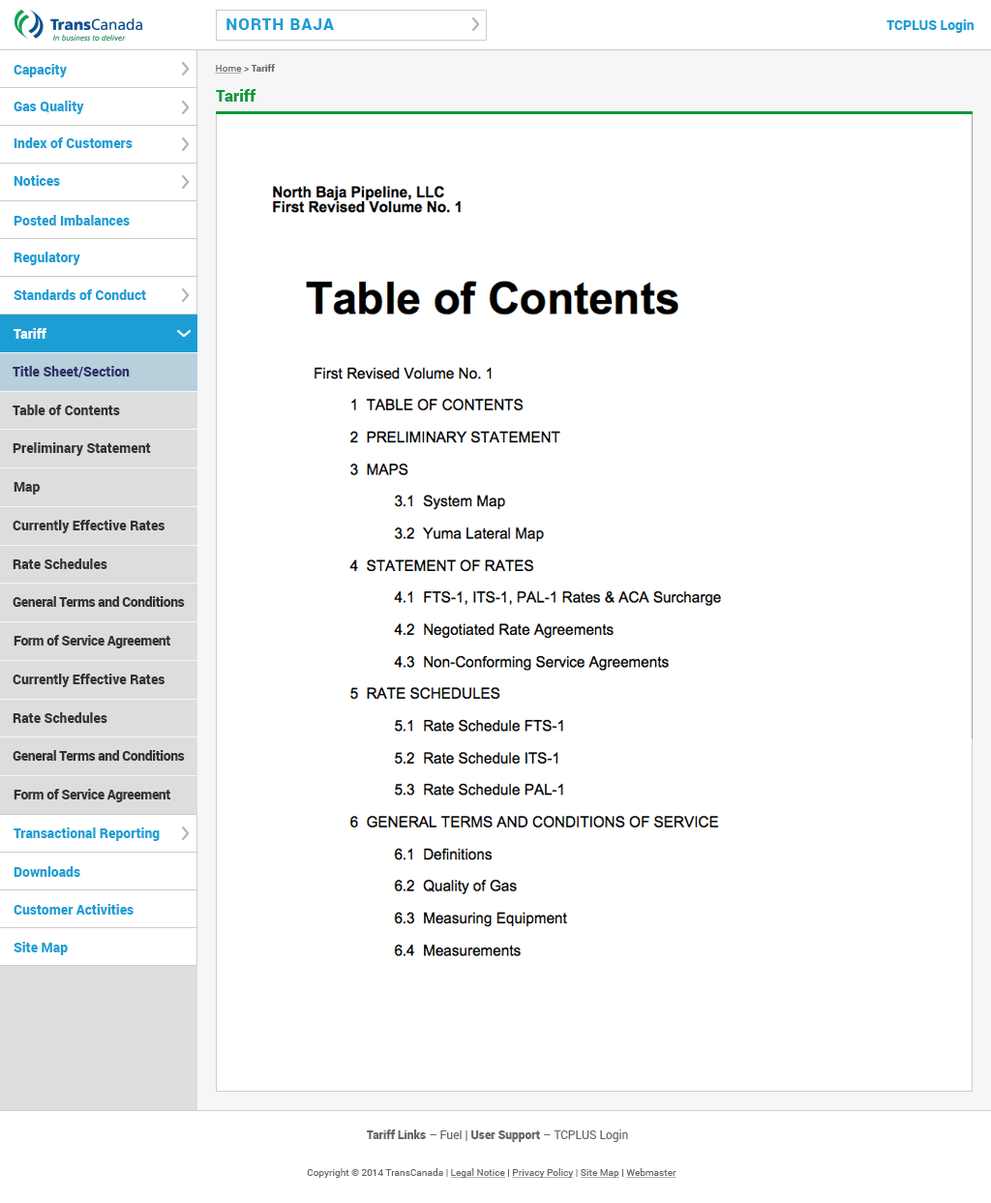
<style>
.page{position:relative;width:991px;height:1203px;background:#ffffff}
.page>*{position:absolute;margin:0}
.t1{font:16.5px "Roboto-Black";letter-spacing:0.06em;color:#1c9ed5}
.t2{font:13.6px "Roboto-Black";color:#1c9ed5}
.t3{font:9.7px "Roboto-Black";color:#666666}
.t4{font:9.7px "Roboto-Regular";color:#666666;text-decoration:underline}
.t5{font:9.7px "Roboto-Regular";color:#666666}
.t6{font:16.5px "Roboto-Black";color:#07993a}
.t7{font:13.6px "Roboto-Black";color:#ffffff}
.t8{font:13.6px "Roboto-Black";color:#2e3069}
.t9{font:13.6px "Roboto-Black";color:#333333}
.t10{font:13.6px "Roboto-Black";letter-spacing:-0.03em;color:#333333}
.t11{font:11.6px "Roboto-Black";color:#666666}
.t12{font:11.6px "Roboto-Regular";color:#666666}
</style>
<div class="page">
<p class="t1" style="left:226px;top:18px;width:108px;height:12px">NORTH BAJA</p>
<p class="t2" style="left:887px;top:19px;width:87px;height:14px">TCPLUS Login</p>
<p class="t2" style="left:14px;top:64px;width:53px;height:13px">Capacity</p>
<p class="t3" style="left:215px;top:64px;width:60px;height:10px"><span class="t4">Home</span><span class="t5"> &gt; </span>Tariff</p>
<p class="t6" style="left:216px;top:89px;width:40px;height:13px">Tariff</p>
<p class="t2" style="left:14px;top:101px;width:70px;height:13px">Gas Quality</p>
<p class="t2" style="left:14px;top:137px;width:119px;height:11px">Index of Customers</p>
<p class="t2" style="left:14px;top:175px;width:46px;height:11px">Notices</p>
<p class="t2" style="left:14px;top:215px;width:116px;height:11px">Posted Imbalances</p>
<p class="t2" style="left:14px;top:252px;width:66px;height:13px">Regulatory</p>
<p class="t2" style="left:14px;top:289px;width:132px;height:11px">Standards of Conduct</p>
<p class="t7" style="left:14px;top:328px;width:32px;height:11px">Tariff</p>
<p class="t8" style="left:13px;top:366px;width:117px;height:11px">Title Sheet/Section</p>
<p class="t9" style="left:13px;top:405px;width:107px;height:10px">Table of Contents</p>
<p class="t9" style="left:13px;top:442px;width:138px;height:14px">Preliminary Statement</p>
<p class="t9" style="left:14px;top:482px;width:26px;height:13px">Map</p>
<p class="t9" style="left:13px;top:520px;width:152px;height:13px">Currently Effective Rates</p>
<p class="t9" style="left:13px;top:558px;width:94px;height:11px">Rate Schedules</p>
<p class="t10" style="left:13px;top:596px;width:172px;height:11px">General Terms and Conditions</p>
<p class="t10" style="left:14px;top:635px;width:157px;height:13px">Form of Service Agreement</p>
<p class="t9" style="left:13px;top:674px;width:152px;height:13px">Currently Effective Rates</p>
<p class="t9" style="left:13px;top:712px;width:94px;height:11px">Rate Schedules</p>
<p class="t10" style="left:13px;top:750px;width:172px;height:11px">General Terms and Conditions</p>
<p class="t10" style="left:14px;top:789px;width:157px;height:13px">Form of Service Agreement</p>
<p class="t2" style="left:14px;top:828px;width:146px;height:13px">Transactional Reporting</p>
<p class="t2" style="left:14px;top:866px;width:66px;height:11px">Downloads</p>
<p class="t2" style="left:14px;top:904px;width:120px;height:11px">Customer Activities</p>
<p class="t2" style="left:14px;top:942px;width:54px;height:13px">Site Map</p>
<p class="t11" style="left:367px;top:1130px;width:261px;height:12px">Tariff Links<span class="t12"> – </span><span class="t12">Fuel | </span>User Support<span class="t12"> – </span><span class="t12">TCPLUS Login</span></p>
<p class="t5" style="left:307px;top:1168px;width:370px;height:10px">Copyright © 2014 TransCanada | <span class="t4">Legal Notice</span> | <span class="t4">Privacy Policy</span> | <span class="t4">Site Map</span> | <span class="t4">Webmaster</span></p>
</div>
